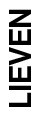
<style>
.page{position:relative;width:40px;height:116px;background:#ffffff}
.page>*{position:absolute;margin:0}
.t1{font:30px "NHaasGroteskDSPro-65Md";color:#000000}
</style>
<div class="page">
<p class="t1" style="left:9px;top:9px;width:22px;height:98px;rotate:-90deg">LIEVEN</p>
</div>
